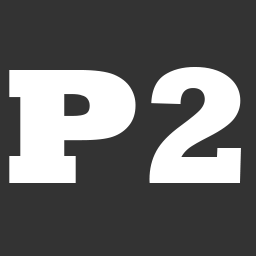
<style>
.page{position:relative;width:256px;height:256px;background:#333333}
.page>*{position:absolute;margin:0}
.t1{font:166.7px "Rockwell-ExtraBold";color:#ffffff}
</style>
<div class="page">
<p class="t1" style="left:9px;top:67px;width:232px;height:116px">P2</p>
</div>
